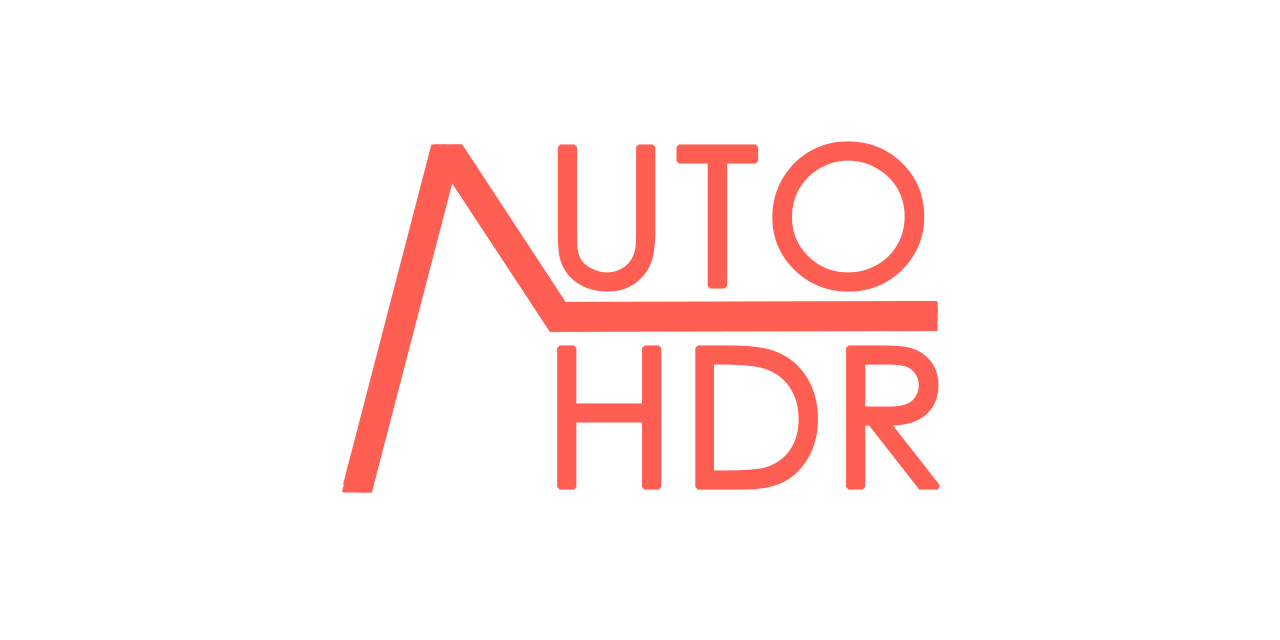
<style>
.page{position:relative;width:1280px;height:640px;background:#ffffff}
.page>*{position:absolute;margin:0}
.t1{font:194.4px/201.4px "CenturyGothic";color:#ff5e52;text-transform:uppercase;font-weight:bold}
</style>
<div class="page">
<p class="t1" style="left:557px;top:141px;width:383px;height:349px">uto<br>HDR</p>
</div>
